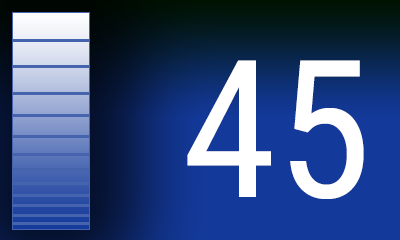
<style>
.page{position:relative;width:400px;height:240px}
.page>*{position:absolute;margin:0}
.t1{font:192px "RobotoCondensed-Regular";color:#ffffff}
</style>
<div class="page">
<p class="t1" style="left:187px;top:60px;width:177px;height:139px">45</p>
</div>
